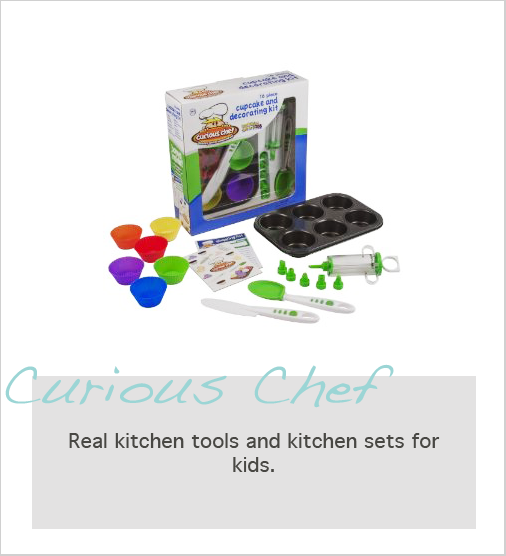
<style>
.page{position:relative;width:506px;height:556px;background:#ffffff}
.page>*{position:absolute;margin:0}
.t1{font:56px "Handwriting-Dakota";color:#9bd5d5}
.t2{font:20px "Geneva";color:#484743}
</style>
<div class="page">
<p class="t1" style="left:5px;top:364px;width:389px;height:44px">Curious Chef</p>
<p class="t2" style="left:69px;top:433px;width:371px;height:39px;text-align:center">Real kitchen tools and kitchen sets for kids.</p>
</div>
